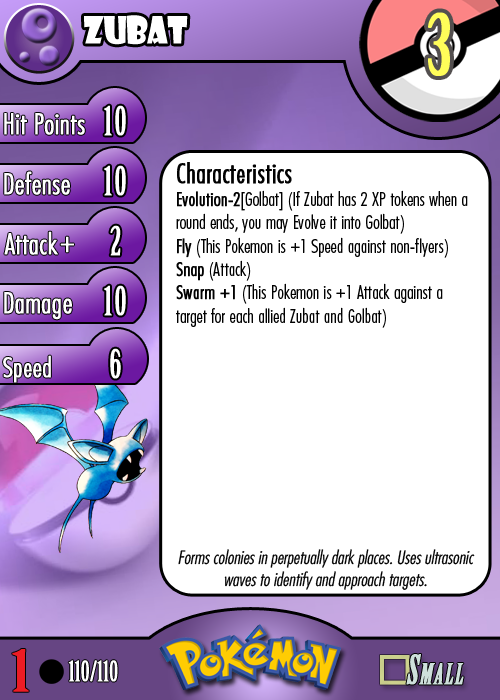
<style>
.page{position:relative;width:500px;height:700px;background:#ffffff}
.page>*{position:absolute;margin:0}
.t1{font:36.7px "ShowcardGothic-Reg";letter-spacing:-0.025em;color:#ffffff;scale:0.91 1}
.t2{font:83.3px "BirchStd";letter-spacing:0.025em;color:#fffd59;font-weight:bold}
.t3{font:27.8px "Futura-CondensedLight";color:#ffffff;font-weight:bold}
.t4{font:38.9px "BirchStd";letter-spacing:0.035em;color:#ffffff;font-weight:bold}
.t5{font:19.4px "FuturaCondensedBQ-Light";color:#010101}
.t6{font:27.8px "FuturaCondensedBQ-Light";color:#010101;font-weight:bold}
.t7{font:19.4px "FuturaCondensedBQ-Light";color:#010101;font-weight:bold}
.t8{font:30.6px "Futura-CondensedLight";color:#ffffff;font-weight:bold}
.t9{font:27.8px "FuturaCondensedBQ-Light";color:#ffffff;font-weight:bold}
.t10{font:18.1px "Futura-CondensedLight";color:#010101;font-style:italic}
.t11{font:55.6px "BirchStd";color:#ed1c24;font-weight:bold;scale:1.5 1}
.t12{font:27.8px "BirchStd";color:#ffffff;font-weight:bold}
</style>
<div class="page">
<p class="t1" style="left:84px;top:15px;width:104px;height:30px">zubat</p>
<p class="t2" style="left:428px;top:12px;width:22px;height:64px">3</p>
<p class="t3" style="left:4px;top:113px;width:81px;height:22px">Hit Points</p>
<p class="t4" style="left:104px;top:105px;width:22px;height:31px">10</p>
<p class="t3" style="left:4px;top:171px;width:66px;height:24px">Defense</p>
<p class="t4" style="left:104px;top:165px;width:22px;height:31px">10</p>
<p class="t5" style="left:176px;top:162px;width:292px;height:166px"><span class="t6">Characteristics<br></span><span class="t7">Evolution-2</span>[Golbat] (If Zubat has 2 XP tokens when a round ends, you may Evolve it into Golbat)<br><span class="t7">Fly</span> (This Pokemon is +1 Speed against non-flyers)<br><span class="t7">Snap</span> (Attack)<br><span class="t7">Swarm +1</span> (This Pokemon is +1 Attack against a target for each allied Zubat and Golbat)</p>
<p class="t3" style="left:4px;top:231px;width:54px;height:24px">Attack</p>
<p class="t4" style="left:110px;top:225px;width:11px;height:31px">2</p>
<p class="t8" style="left:60px;top:236px;width:14px;height:17px">+</p>
<p class="t3" style="left:4px;top:292px;width:68px;height:28px">Damage</p>
<p class="t4" style="left:104px;top:285px;width:22px;height:31px">10</p>
<p class="t4" style="left:110px;top:348px;width:11px;height:31px">6</p>
<p class="t9" style="left:3px;top:355px;width:48px;height:28px">Speed</p>
<p class="t10" style="left:178px;top:549px;width:297px;height:41px;text-align:center">Forms colonies in perpetually dark places. Uses ultrasonic waves to identify and approach targets.</p>
<p class="t11" style="left:12px;top:649px;width:17px;height:43px">1</p>
<p class="t12" style="left:68px;top:660px;width:50px;height:22px">110/110</p>
</div>
